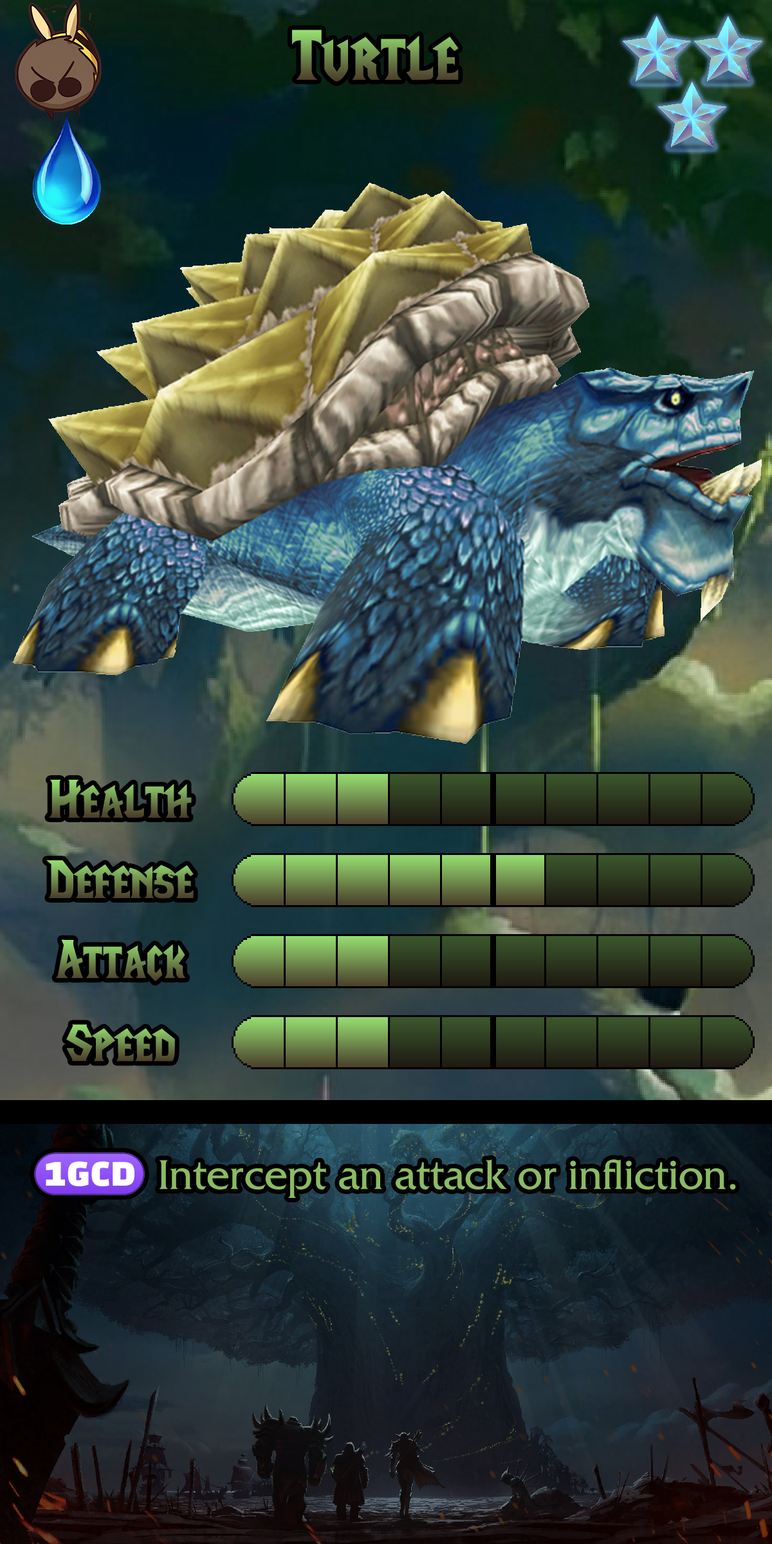
<style>
.page{position:relative;width:772px;height:1544px}
.page>*{position:absolute;margin:0}
.t1{font:121.6px "LifeCraft"}
.t2{font:92.7px "LifeCraft"}
.t3{font:74.6px "FrizQuadrataStd"}
.t4{font:74.6px "stoogedings-Regular"}
</style>
<div class="page">
<p class="t1" style="left:292px;top:30px;width:167px;height:52px">Turtle</p>
<p class="t2" style="left:49px;top:780px;width:143px;height:38px">Health</p>
<p class="t2" style="left:46px;top:860px;width:148px;height:39px">Defense</p>
<p class="t2" style="left:56px;top:939px;width:130px;height:43px">Attack</p>
<p class="t2" style="left:66px;top:1024px;width:109px;height:38px">Speed</p>
<p class="t3" style="left:34px;top:1152px;width:702px;height:46px"><span class="t4">(1GCD)</span> Intercept an attack or infliction.</p>
</div>
